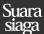
<style>
.page{position:relative;width:44px;height:34px;background:#333333}
.page>*{position:absolute;margin:0}
.t1{font:18px/14px "HeiseiMinStd-W7";letter-spacing:-0.08em;color:#fefefe}
</style>
<div class="page">
<p class="t1" style="left:2px;top:3px;width:41px;height:33px;text-align:center">Suara<br>siaga</p>
</div>
